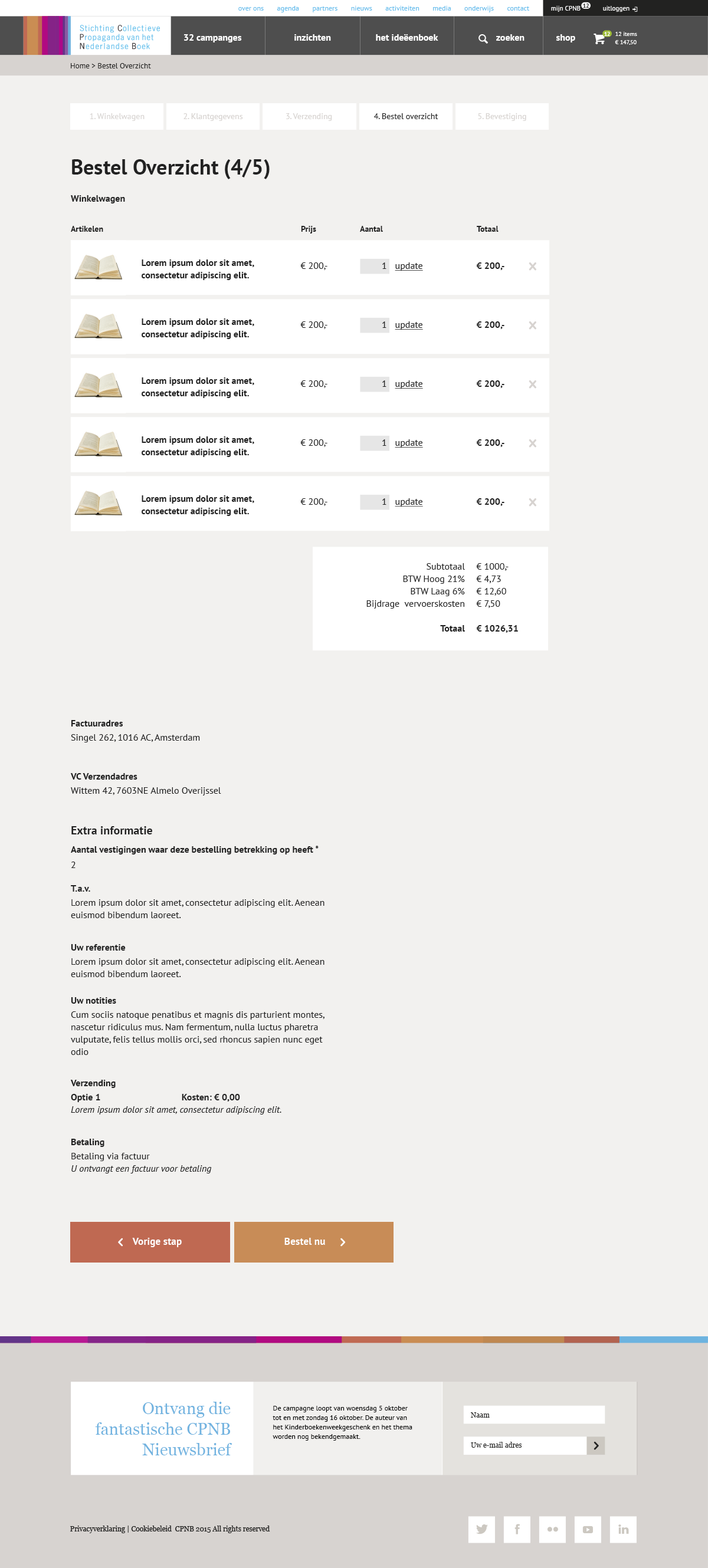
<style>
.page{position:relative;width:708px;height:1568px;background:#f2f1ef}
.page>*{position:absolute;margin:0}
.t1{font:7.1px "PTSans-Regular";color:#65bdec}
.t2{font:6.5px "PTSans-Regular";color:#ffffff}
.t3{font:5.9px "PTSans-Bold";letter-spacing:-0.05em;color:#222221}
.t4{font:9.4px "PTSans-Bold";color:#ffffff}
.t5{font:5.9px "PTSans-Bold";letter-spacing:-0.05em;color:#ffffff}
.t6{font:5.9px/8.3px "PTSans-Regular";color:#ffffff}
.t7{font:7.7px "PTSans-Regular";color:#222221}
.t8{font:8.3px "PTSans-Regular";color:#d7d3d0}
.t9{font:8.3px "PTSans-Regular";color:#222222}
.t10{font:21.2px "PTSans-Bold";color:#222222}
.t11{font:9.4px "PTSans-Bold";color:#222222}
.t12{font:8.3px "PTSans-Bold";color:#222222}
.t13{font:9.4px/12.4px "PTSans-Bold";color:#222222}
.t14{font:9.4px "PTSans-Regular";color:#222222}
.t15{font:9.4px "PTSans-Regular";color:#222222;text-decoration:underline}
.t16{font:9.4px/12.4px "PTSans-Regular";color:#222222}
.t17{font:11.8px "PTSans-Bold";color:#222222}
.t18{font:9.4px/12.4px "PTSans-Italic";color:#222222}
.t19{font:10.3px "PTSans-Bold";color:#ffffff}
.t20{font:16.5px/20.6px "Georgia";color:#5daadc}
.t21{font:7.1px/9.4px "PTSans-Regular";color:#000000}
.t22{font:7.1px "Georgia";color:#222221}
</style>
<div class="page">
<p class="t1" style="left:238px;top:6px;width:292px;height:6px">over ons       agenda       partners       nieuws       activiteiten       media       onderwijs       contact</p>
<p class="t2" style="left:551px;top:6px;width:29px;height:6px">mijn CPNB</p>
<p class="t3" style="left:583px;top:4px;width:6px;height:4px">12</p>
<p class="t2" style="left:603px;top:6px;width:26px;height:6px">uitloggen</p>
<p class="t4" style="left:184px;top:34px;width:58px;height:8px">32 campanges</p>
<p class="t4" style="left:294px;top:34px;width:37px;height:7px">inzichten</p>
<p class="t4" style="left:376px;top:34px;width:62px;height:7px">het ideëenboek</p>
<p class="t4" style="left:496px;top:34px;width:28px;height:7px">zoeken</p>
<p class="t4" style="left:555px;top:34px;width:20px;height:8px">shop</p>
<p class="t5" style="left:604px;top:32px;width:6px;height:4px">12</p>
<p class="t6" style="left:614px;top:32px;width:23px;height:13px">12 items<br>€ 147,50</p>
<p class="t7" style="left:71px;top:63px;width:80px;height:5px">Home &gt; Bestel Overzicht</p>
<p class="t8" style="left:90px;top:113px;width:54px;height:8px">1. Winkelwagen</p>
<p class="t8" style="left:183px;top:113px;width:60px;height:8px">2. Klantgegevens</p>
<p class="t8" style="left:286px;top:113px;width:46px;height:8px">3. Verzending</p>
<p class="t9" style="left:373px;top:113px;width:65px;height:6px">4. Bestel overzicht</p>
<p class="t8" style="left:478px;top:113px;width:48px;height:8px">5. Bevestiging</p>
<p class="t10" style="left:72px;top:159px;width:197px;height:20px">Bestel Overzicht (4/5)</p>
<p class="t11" style="left:71px;top:195px;width:54px;height:8px">Winkelwagen</p>
<p class="t12" style="left:71px;top:226px;width:32px;height:6px">Artikelen</p>
<p class="t12" style="left:301px;top:226px;width:15px;height:8px">Prijs</p>
<p class="t12" style="left:360px;top:226px;width:23px;height:6px">Aantal</p>
<p class="t12" style="left:476px;top:226px;width:22px;height:6px">Totaal</p>
<p class="t13" style="left:142px;top:259px;width:112px;height:21px">Lorem ipsum dolor sit amet, <br>consectetur adipiscing elit.</p>
<p class="t14" style="left:300px;top:262px;width:27px;height:8px">€ 200,-</p>
<p class="t14" style="left:382px;top:262px;width:4px;height:7px">1</p>
<p class="t15" style="left:395px;top:262px;width:28px;height:9px">update</p>
<p class="t11" style="left:476px;top:262px;width:28px;height:8px">€ 200,-</p>
<p class="t13" style="left:142px;top:318px;width:112px;height:21px">Lorem ipsum dolor sit amet, <br>consectetur adipiscing elit.</p>
<p class="t14" style="left:300px;top:321px;width:27px;height:8px">€ 200,-</p>
<p class="t14" style="left:382px;top:321px;width:4px;height:7px">1</p>
<p class="t15" style="left:395px;top:321px;width:28px;height:9px">update</p>
<p class="t11" style="left:476px;top:321px;width:28px;height:8px">€ 200,-</p>
<p class="t13" style="left:142px;top:377px;width:112px;height:21px">Lorem ipsum dolor sit amet, <br>consectetur adipiscing elit.</p>
<p class="t14" style="left:300px;top:380px;width:27px;height:8px">€ 200,-</p>
<p class="t14" style="left:382px;top:380px;width:4px;height:7px">1</p>
<p class="t15" style="left:395px;top:380px;width:28px;height:9px">update</p>
<p class="t11" style="left:476px;top:380px;width:28px;height:8px">€ 200,-</p>
<p class="t13" style="left:142px;top:436px;width:112px;height:21px">Lorem ipsum dolor sit amet, <br>consectetur adipiscing elit.</p>
<p class="t14" style="left:300px;top:439px;width:27px;height:8px">€ 200,-</p>
<p class="t14" style="left:382px;top:439px;width:4px;height:7px">1</p>
<p class="t15" style="left:395px;top:439px;width:28px;height:9px">update</p>
<p class="t11" style="left:476px;top:439px;width:28px;height:8px">€ 200,-</p>
<p class="t13" style="left:142px;top:495px;width:112px;height:21px">Lorem ipsum dolor sit amet, <br>consectetur adipiscing elit.</p>
<p class="t14" style="left:300px;top:498px;width:27px;height:8px">€ 200,-</p>
<p class="t14" style="left:382px;top:498px;width:4px;height:7px">1</p>
<p class="t15" style="left:395px;top:498px;width:28px;height:9px">update</p>
<p class="t11" style="left:476px;top:498px;width:28px;height:8px">€ 200,-</p>
<p class="t16" style="left:366px;top:563px;width:99px;height:69px;text-align:right">Subtotaal<br>BTW Hoog 21%<br>BTW Laag 6%<br>Bijdrage  vervoerskosten<br><span class="t13"><br>Totaal</span></p>
<p class="t16" style="left:476px;top:563px;width:42px;height:70px">€ 1000,-<br>€ 4,73<br>€ 12,60<br>€ 7,50<br><span class="t13"><br>€ 1026,31</span></p>
<p class="t11" style="left:71px;top:720px;width:52px;height:7px">Factuuradres</p>
<p class="t14" style="left:71px;top:734px;width:129px;height:8px">Singel 262, 1016 AC, Amsterdam</p>
<p class="t11" style="left:70px;top:773px;width:67px;height:7px">VC Verzendadres</p>
<p class="t14" style="left:71px;top:787px;width:150px;height:8px">Wittem 42, 7603NE Almelo Overijssel</p>
<p class="t17" style="left:71px;top:826px;width:81px;height:8px">Extra informatie</p>
<p class="t11" style="left:71px;top:846px;width:247px;height:8px">Aantal vestigingen waar deze bestelling betrekking op heeft *</p>
<p class="t14" style="left:71px;top:862px;width:4px;height:6px">2</p>
<p class="t11" style="left:71px;top:885px;width:19px;height:7px">T.a.v.</p>
<p class="t16" style="left:71px;top:899px;width:253px;height:19px">Lorem ipsum dolor sit amet, consectetur adipiscing elit. Aenean euismod bibendum laoreet.</p>
<p class="t11" style="left:71px;top:944px;width:55px;height:7px">Uw referentie</p>
<p class="t16" style="left:71px;top:958px;width:253px;height:19px">Lorem ipsum dolor sit amet, consectetur adipiscing elit. Aenean euismod bibendum laoreet.</p>
<p class="t11" style="left:71px;top:997px;width:45px;height:7px">Uw notities</p>
<p class="t16" style="left:71px;top:1011px;width:253px;height:44px">Cum sociis natoque penatibus et magnis dis parturient montes, nascetur ridiculus mus. Nam fermentum, nulla luctus pharetra vulputate, felis tellus mollis orci, sed rhoncus sapien nunc eget odio</p>
<p class="t11" style="left:70px;top:1080px;width:46px;height:8px">Verzending</p>
<p class="t18" style="left:71px;top:1094px;width:210px;height:21px"><span class="t13">Optie 1 Kosten: € 0,00<br></span>Lorem ipsum dolor sit amet, consectetur adipiscing elit.</p>
<p class="t11" style="left:71px;top:1139px;width:33px;height:8px">Betaling</p>
<p class="t18" style="left:71px;top:1153px;width:141px;height:20px"><span class="t16">Betaling via factuur<br></span>U ontvangt een factuur voor betaling</p>
<p class="t19" style="left:132px;top:1238px;width:50px;height:9px">Vorige stap</p>
<p class="t19" style="left:284px;top:1238px;width:41px;height:7px">Bestel nu</p>
<p class="t20" style="left:95px;top:1402px;width:137px;height:53px;text-align:right;opacity:0.9">Ontvang die<br>fantastische CPNB<br>Nieuwsbrief</p>
<p class="t21" style="left:272px;top:1406px;width:140px;height:35px">De campagne loopt van woensdag 5 oktober tot en met zondag 16 oktober. De auteur van het Kinderboekenweekgeschenk en het thema worden nog bekendgemaakt.</p>
<p class="t22" style="left:471px;top:1412px;width:18px;height:6px">Naam</p>
<p class="t22" style="left:471px;top:1442px;width:51px;height:6px">Uw e-mail adres</p>
<p class="t22" style="left:70px;top:1526px;width:200px;height:7px">Privacyverklaring | Cookiebeleid  CPNB 2015 All rights reserved</p>
</div>
